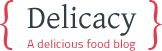
<style>
.page{position:relative;width:162px;height:51px;background:#ffffff}
.page>*{position:absolute;margin:0}
.t1{font:60px "Gabriola";letter-spacing:-0.075em;color:#df3d4e}
.t2{font:32px "GentiumBasic";color:#303e41}
.t3{font:12px "TitilliumText22L-Regular";letter-spacing:0.01em;color:#df3d4e}
</style>
<div class="page">
<p class="t1" style="left:0px;top:0px;width:162px;height:50px">{                       }</p>
<p class="t2" style="left:27px;top:3px;width:110px;height:33px">Delicacy</p>
<p class="t3" style="left:27px;top:39px;width:109px;height:12px">A delicious food blog</p>
</div>
